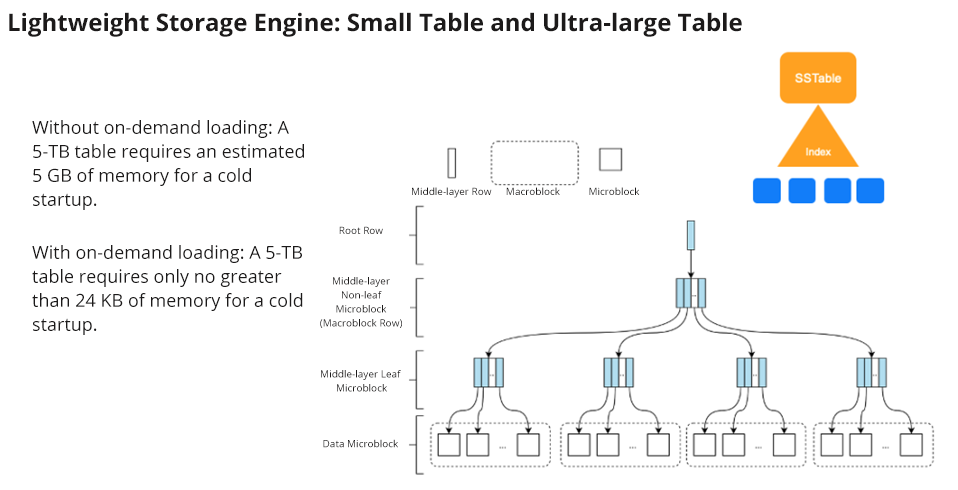
<style>
.page{position:relative;width:958px;height:490px;background:#ffffff}
.page>*{position:absolute;margin:0}
.t1{font:24px "OpenSans-Bold";color:#1c1a1a}
.t2{font:18px/24px "OpenSans";color:#1c1a1a}
.t3{font:10px "OpenSans";color:#1c1a1a}
.t4{font:10px "OpenSans"}
.t5{font:10px/14px "OpenSans";color:#1c1a1a}
</style>
<div class="page">
<p class="t1" style="left:9px;top:12px;width:733px;height:25px">Lightweight Storage Engine: Small Table and Ultra-large Table</p>
<p class="t2" style="left:32px;top:120px;width:272px;height:90px">Without on-demand loading: A 5-TB table requires an estimated 5 GB of memory for a cold startup.</p>
<p class="t3" style="left:412px;top:187px;width:80px;height:11px">Middle-layer Row</p>
<p class="t3" style="left:506px;top:187px;width:54px;height:8px">Macroblock</p>
<p class="t3" style="left:589px;top:187px;width:51px;height:8px">Microblock</p>
<p class="t4" style="left:339px;top:226px;width:44px;height:8px">Root Row</p>
<p class="t2" style="left:32px;top:245px;width:271px;height:90px">With on-demand loading: A 5-TB table requires only no greater than 24 KB of memory for a cold startup.</p>
<p class="t5" style="left:320px;top:277px;width:82px;height:51px;text-align:center">Middle-layer Non-leaf Microblock (Macroblock Row)</p>
<p class="t5" style="left:321px;top:370px;width:80px;height:22px;text-align:center">Middle-layer Leaf <br>Microblock</p>
<p class="t3" style="left:323px;top:439px;width:75px;height:9px">Data Microblock</p>
</div>
